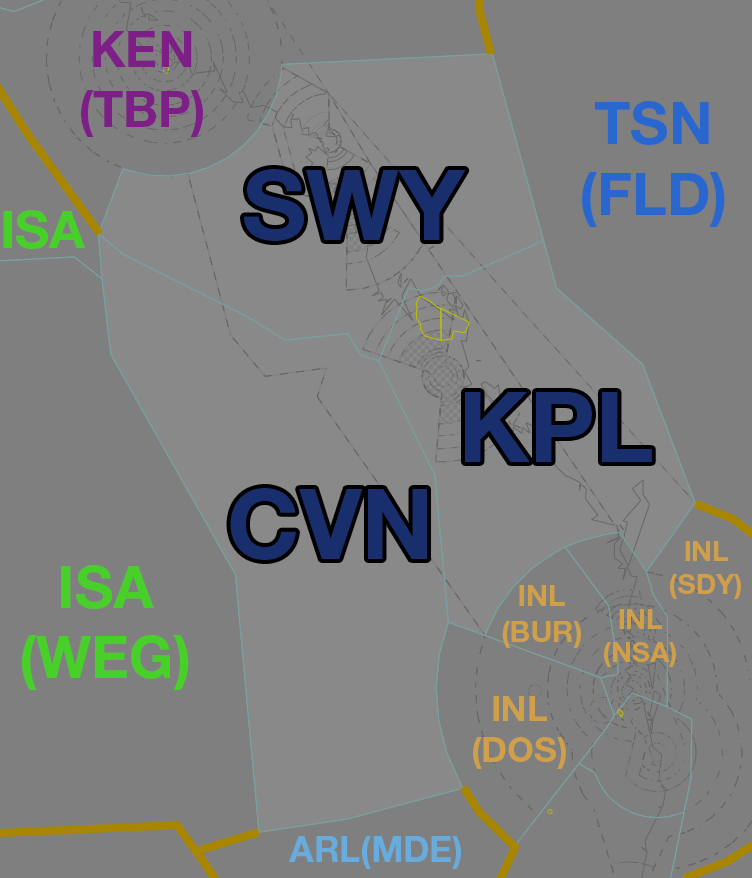
<style>
.page{position:relative;width:752px;height:878px;background:#7f7f7f}
.page>*{position:absolute;margin:0}
.t1{font:49.8px "HelveticaNeueLTStd-Bd";color:#7e1e87}
.t2{font:59.2px "HelveticaNeueLTStd-Bd";color:#2967cf}
.t3{font:98.3px "HelveticaNeueLTStd-Bd";color:#182e6d}
.t4{font:52.5px "HelveticaNeueLTStd-Bd";color:#48cf29}
.t5{font:27.6px "HelveticaNeueLTStd-Bd";color:#d09f4a}
.t6{font:58.7px "HelveticaNeueLTStd-Bd";color:#48cf29}
.t7{font:29.4px "HelveticaNeueLTStd-Bd";color:#d09f4a}
.t8{font:34.7px "HelveticaNeueLTStd-Bd";color:#d09f4a}
.t9{font:35.3px "HelveticaNeueLTStd-Bd";color:#67acdc}
</style>
<div class="page">
<p class="t1" style="left:81px;top:31px;width:122px;height:106px;text-align:center">KEN<br>(TBP)</p>
<p class="t2" style="left:582px;top:101px;width:143px;height:126px;text-align:center">TSN<br>(FLD)</p>
<p class="t3" style="left:244px;top:169px;width:222px;height:72px">SWY</p>
<p class="t4" style="left:3px;top:210px;width:82px;height:39px">ISA</p>
<p class="t3" style="left:465px;top:392px;width:187px;height:70px">KPL</p>
<p class="t3" style="left:230px;top:488px;width:197px;height:72px">CVN</p>
<p class="t5" style="left:670px;top:541px;width:71px;height:58px;text-align:center">INL<br>(SDY)</p>
<p class="t6" style="left:22px;top:565px;width:167px;height:125px;text-align:center">ISA<br>(WEG)</p>
<p class="t7" style="left:502px;top:585px;width:79px;height:63px;text-align:center">INL<br>(BUR)</p>
<p class="t5" style="left:604px;top:609px;width:72px;height:58px;text-align:center">INL<br>(NSA)</p>
<p class="t8" style="left:473px;top:696px;width:93px;height:73px;text-align:center">INL<br>(DOS)</p>
<p class="t9" style="left:289px;top:836px;width:172px;height:33px">ARL(MDE)</p>
</div>
